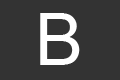
<style>
.page{position:relative;width:120px;height:80px;background:#333333}
.page>*{position:absolute;margin:0}
.t1{font:72px "ArialMT";color:#ffffff}
</style>
<div class="page">
<p class="t1" style="left:40px;top:13px;width:40px;height:52px">B</p>
</div>
